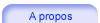
<style>
.page{position:relative;width:100px;height:23px;background:#e1e4fc}
.page>*{position:absolute;margin:0}
.t1{font:11px "ArialMT";color:#092ff6}
</style>
<div class="page">
<p class="t1" style="left:29px;top:12px;width:43px;height:11px">A propos</p>
</div>
